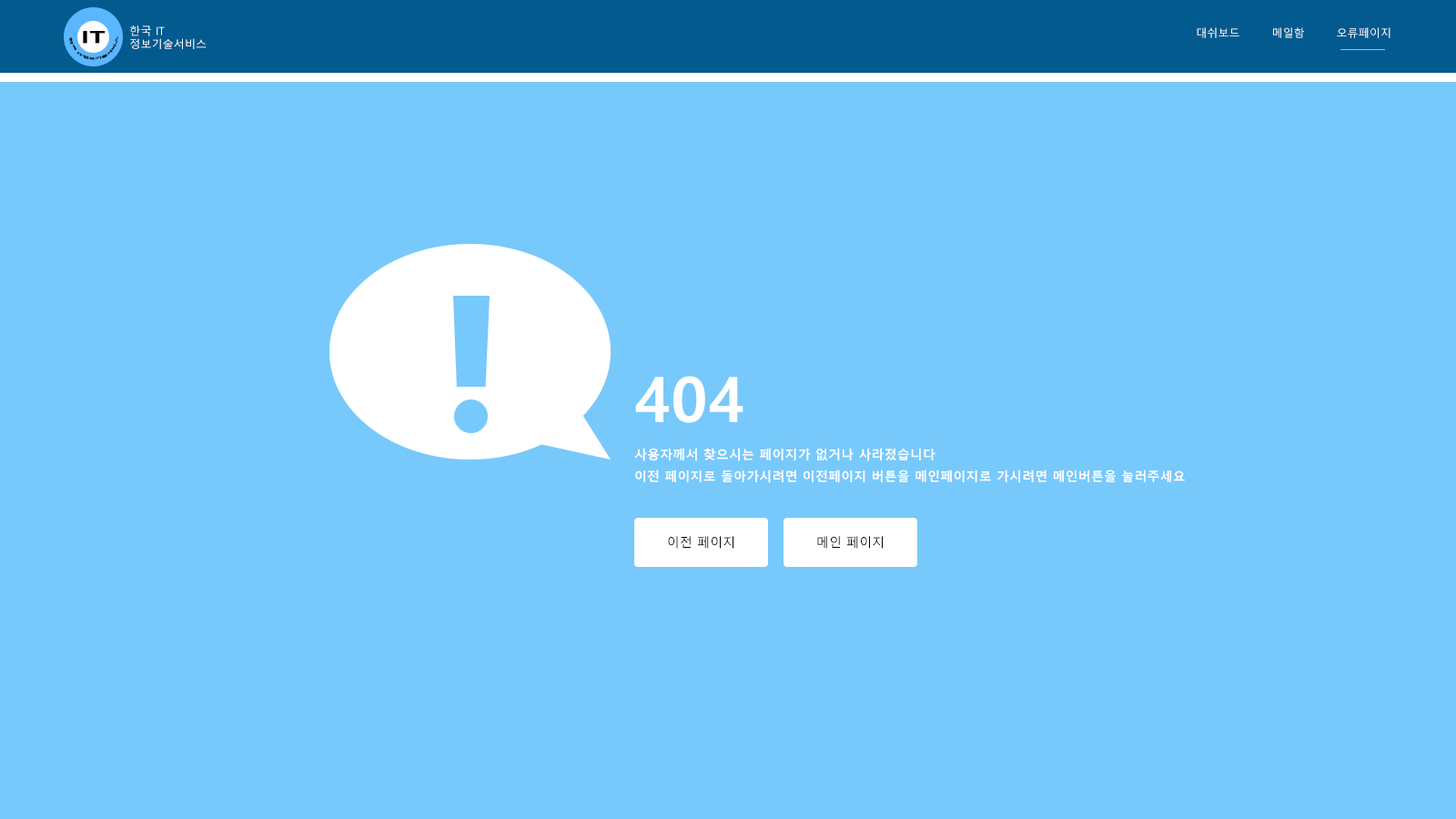
<style>
.page{position:relative;width:1456px;height:819px;background:#77c9fb}
.page>*{position:absolute;margin:0}
.t1{font:10.9px "MalgunGothic";letter-spacing:0.01em;color:#ffffff}
.t2{font:2.7px "MalgunGothicBold";letter-spacing:-0.01em;color:#000000;scale:1.6 1}
.t3{font:16.4px "MalgunGothicBold";letter-spacing:-0.01em;color:#000000;font-weight:bold;scale:1.6 1}
.t4{font:12.7px/21.8px "MalgunGothicBold";letter-spacing:0.01em;color:#ffffff}
.t5{font:62.8px/66.4px "MalgunGothicBold";letter-spacing:0.01em;color:#ffffff}
.t6{font:12.7px/37.3px "MalgunGothicBold";letter-spacing:0.01em;color:#ffffff}
.t7{font:12.7px "MalgunGothic";letter-spacing:0.01em;color:#000000}
</style>
<div class="page">
<p class="t1" style="left:130px;top:25px;width:77px;height:24px">한국 IT<br>정보기술서비스</p>
<p class="t1" style="left:1197px;top:27px;width:193px;height:11px">대쉬보드        메일함        오류페이지</p>
<p class="t2" style="left:69px;top:36px;width:49px;height:24px;text-align:center">한국 IT정보기술서비스</p>
<p class="t3" style="left:83px;top:31px;width:23px;height:13px">IT</p>
<p class="t4" style="left:634px;top:376px;width:551px;height:107px"><span class="t5">404<br></span><span class="t6">사용자께서 찾으시는 페이지가 없거나 사라졌습니다<br></span>이전 페이지로 돌아가시려면 이전페이지 버튼을 메인페이지로 가시려면 메인버튼을 눌러주세요</p>
<p class="t7" style="left:668px;top:536px;width:65px;height:13px">이전 페이지</p>
<p class="t7" style="left:817px;top:536px;width:66px;height:13px">메인 페이지</p>
</div>
